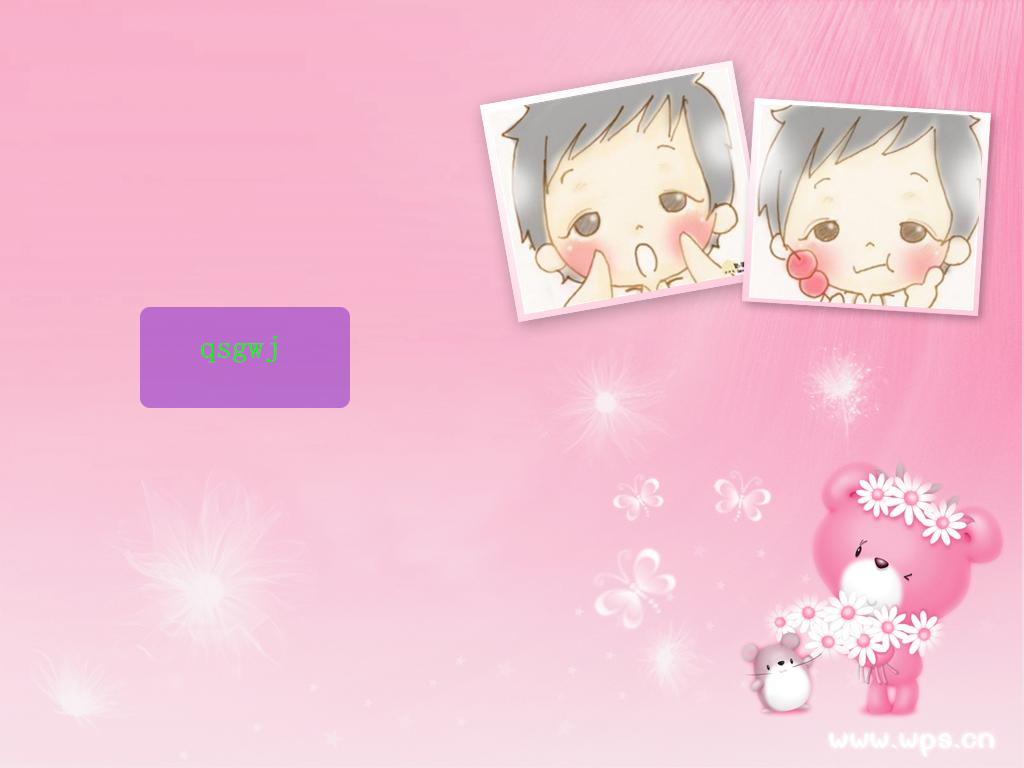
<style>
.page{position:relative;width:1024px;height:768px}
.page>*{position:absolute;margin:0}
.t1{font:32px "SimSun";color:#00ff00}
</style>
<div class="page">
<p class="t1" style="left:201px;top:335px;width:76px;height:28px">qsgwj</p>
</div>
